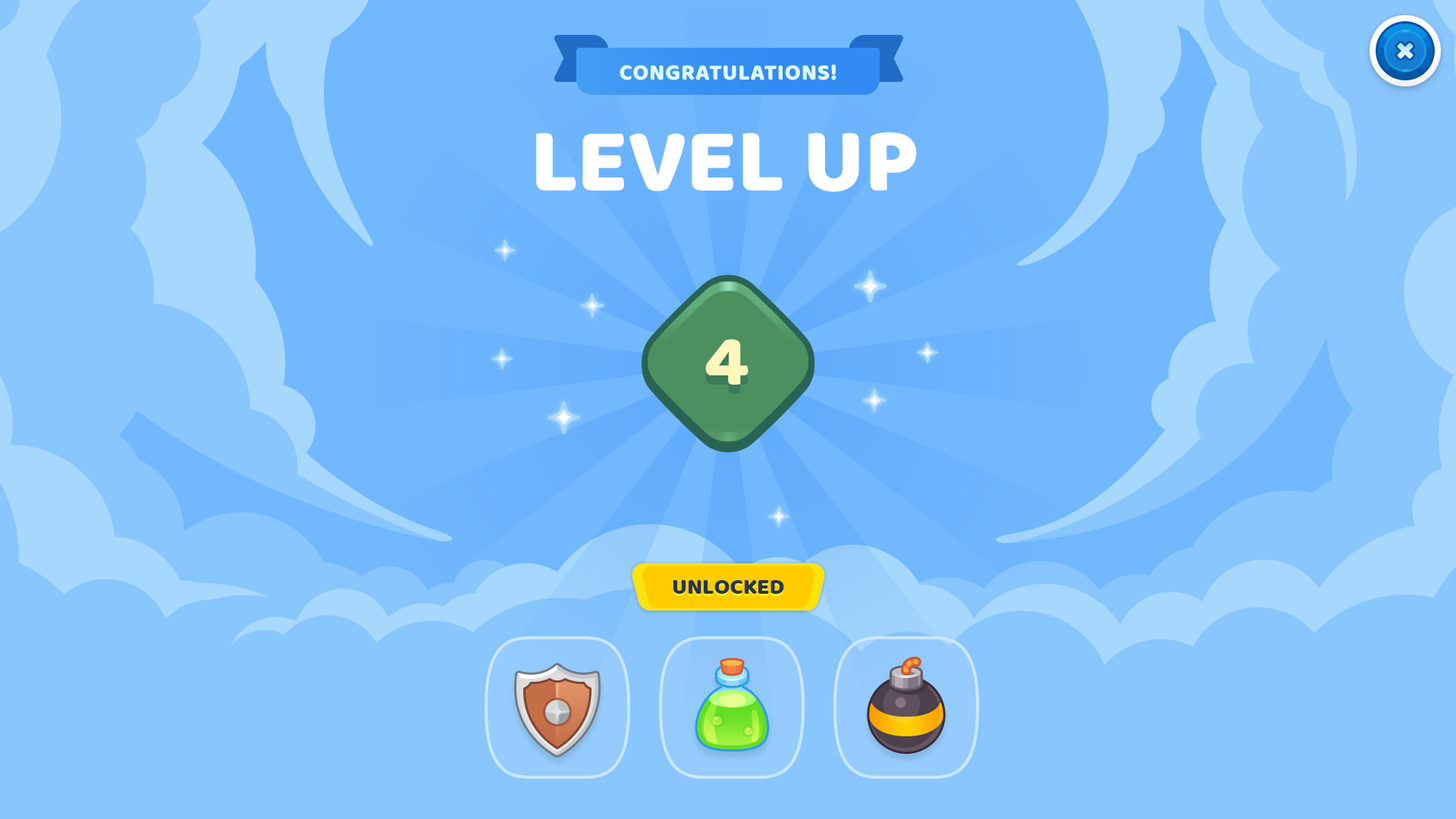
<style>
.page{position:relative;width:1456px;height:819px;background:#89c6fd}
.page>*{position:absolute;margin:0}
.t1{font:22.7px "BalooBhaijaan-Regular";color:#defbff;text-transform:uppercase}
.t2{font:92.5px "BalooBhaijaan-Regular";color:#ffffff;text-transform:uppercase}
.t3{font:72.8px "BalooBhaijaan-Regular";color:#fff7bc;text-transform:uppercase}
.t4{font:22.7px "BalooBhaijaan-Regular";color:#273550;text-transform:uppercase}
</style>
<div class="page">
<p class="t1" style="left:620px;top:64px;width:216px;height:16px">Congratulations!</p>
<p class="t2" style="left:536px;top:132px;width:381px;height:60px">Level up</p>
<p class="t3" style="left:705px;top:339px;width:43px;height:46px">4</p>
<p class="t4" style="left:673px;top:580px;width:111px;height:14px">unlocked</p>
</div>
